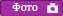
<style>
.page{position:relative;width:63px;height:16px;background:#a629a6}
.page>*{position:absolute;margin:0}
.t1{font:11px "Georgia";color:#ffffff}
</style>
<div class="page">
<p class="t1" style="left:12px;top:3px;width:26px;height:8px">Фото</p>
</div>
